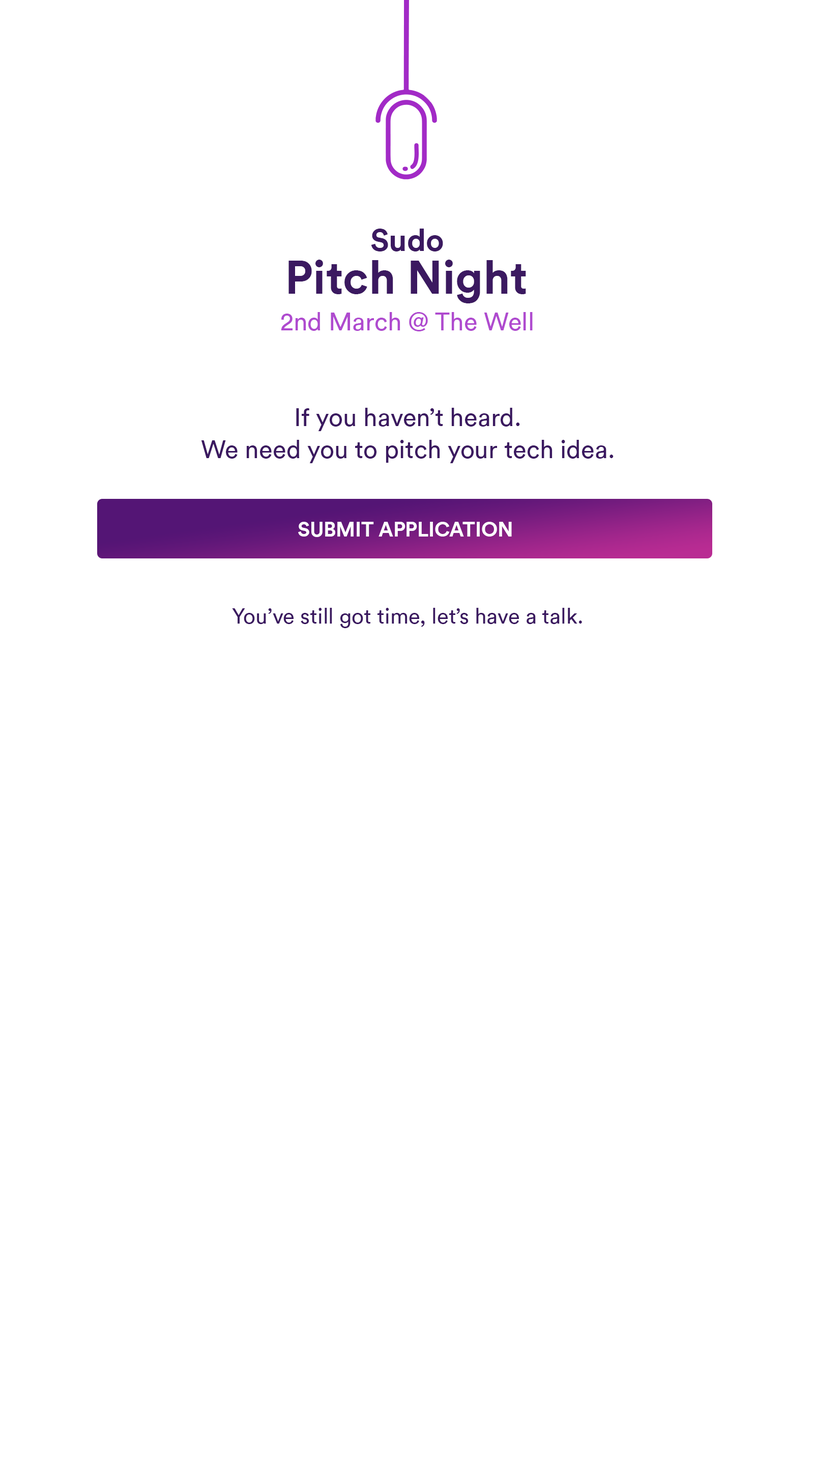
<style>
.page{position:relative;width:814px;height:1464px;background:#ffffff}
.page>*{position:absolute;margin:0}
.t1{font:31.2px "CircularStd-Bold";color:#3b1960}
.t2{font:46.5px "CircularStd-Bold";color:#3b1960}
.t3{font:25.1px "CircularStd-Book";color:#af4acf}
.t4{font:25.1px "CircularStd-Book";color:#3b1960}
.t5{font:20.1px "CircularStd-Bold";color:#ffffff}
.t6{font:21.5px "CircularStd-Book";color:#3b1960}
</style>
<div class="page">
<p class="t1" style="left:371px;top:229px;width:72px;height:22px">Sudo</p>
<p class="t2" style="left:289px;top:260px;width:237px;height:43px">Pitch Night</p>
<p class="t3" style="left:281px;top:312px;width:252px;height:19px">2nd March @ The Well</p>
<p class="t4" style="left:296px;top:408px;width:224px;height:23px">If you haven’t heard.</p>
<p class="t4" style="left:201px;top:440px;width:413px;height:23px">We need you to pitch your tech idea.</p>
<p class="t5" style="left:298px;top:522px;width:214px;height:15px">SUBMIT APPLICATION</p>
<p class="t6" style="left:232px;top:608px;width:350px;height:20px">You’ve still got time, let’s have a talk.</p>
</div>
